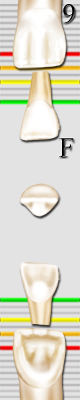
<style>
.page{position:relative;width:80px;height:400px;background:#e4e3e3}
.page>*{position:absolute;margin:0}
.t1{font:28.4px "TimesNewRomanPSMT";letter-spacing:0.005em;color:#000000}
</style>
<div class="page">
<p class="t1" style="left:63px;top:4px;width:12px;height:20px">9</p>
<p class="t1" style="left:59px;top:138px;width:15px;height:19px">F</p>
</div>
